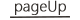
<style>
.page{position:relative;width:80px;height:20px;background:#ffffff}
.page>*{position:absolute;margin:0}
.t1{font:14px "MicrosoftYaHeiLight";color:#34302d;font-weight:bold}
</style>
<div class="page">
<p class="t1" style="left:15px;top:0px;width:51px;height:15px">pageUp</p>
</div>
